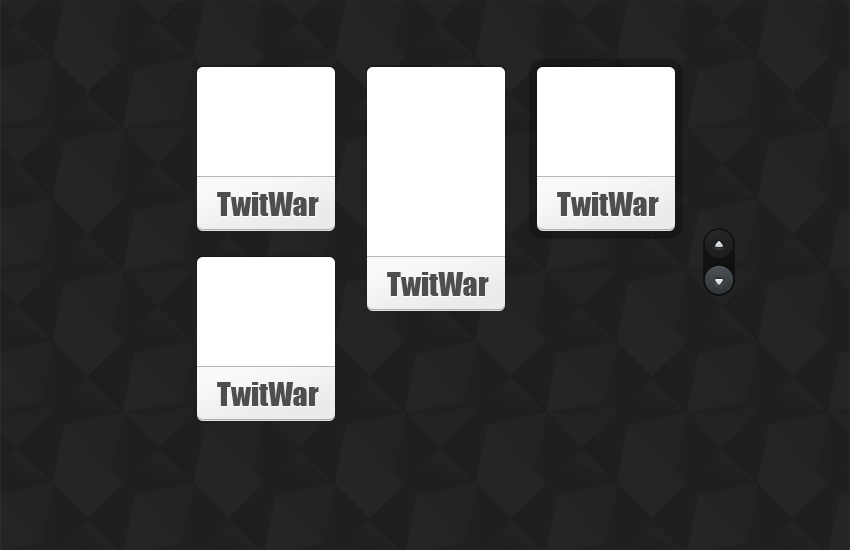
<style>
.page{position:relative;width:850px;height:550px;background:#1f1f1f}
.page>*{position:absolute;margin:0}
.t1{font:30px "Impact";color:#4e4e4e}
</style>
<div class="page">
<p class="t1" style="left:217px;top:192px;width:102px;height:24px">TwitWar</p>
<p class="t1" style="left:557px;top:192px;width:102px;height:24px">TwitWar</p>
<p class="t1" style="left:387px;top:272px;width:102px;height:24px">TwitWar</p>
<p class="t1" style="left:217px;top:382px;width:102px;height:24px">TwitWar</p>
</div>
